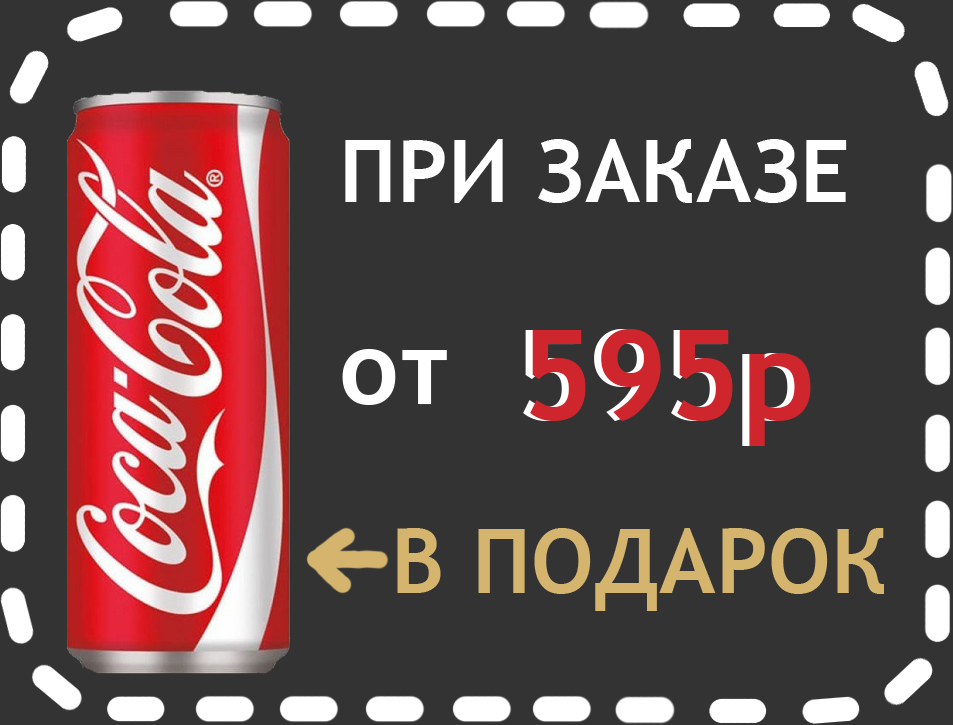
<style>
.page{position:relative;width:953px;height:725px;background:#333333}
.page>*{position:absolute;margin:0}
.t1{font:86.5px "TrebuchetMS-Bold";color:#ffffff}
.t2{font:125.9px "TrebuchetMS-Bold";color:#cf252d}
.t3{font:104.4px "TrebuchetMS-Bold";color:#ffffff}
.t4{font:89.5px "TrebuchetMS-Bold";color:#d5b56d}
</style>
<div class="page">
<p class="t1" style="left:345px;top:139px;width:502px;height:64px">ПРИ ЗАКАЗЕ</p>
<p class="t2" style="left:523px;top:329px;width:281px;height:117px">595р</p>
<p class="t2" style="left:530px;top:329px;width:281px;height:117px">595р</p>
<p class="t3" style="left:342px;top:349px;width:105px;height:56px">от%(</p>
<p class="t4" style="left:397px;top:528px;width:487px;height:83px">В ПОДАРОК</p>
</div>
